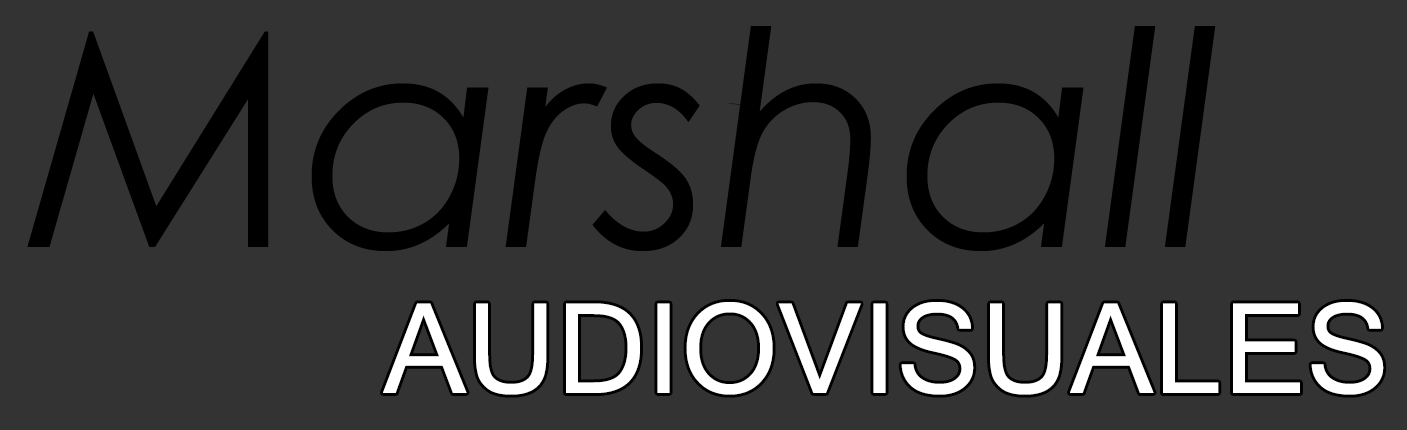
<style>
.page{position:relative;width:1407px;height:430px;background:#333333}
.page>*{position:absolute;margin:0}
.t1{font:300px "CenturyGothic-Italic";color:#000000}
.t2{font:125px "MicrosoftSansSerif";color:#ffffff}
</style>
<div class="page">
<p class="t1" style="left:27px;top:26px;width:1189px;height:225px">Marshall</p>
<p class="t2" style="left:383px;top:302px;width:1001px;height:93px">AUDIOVISUALES</p>
</div>
